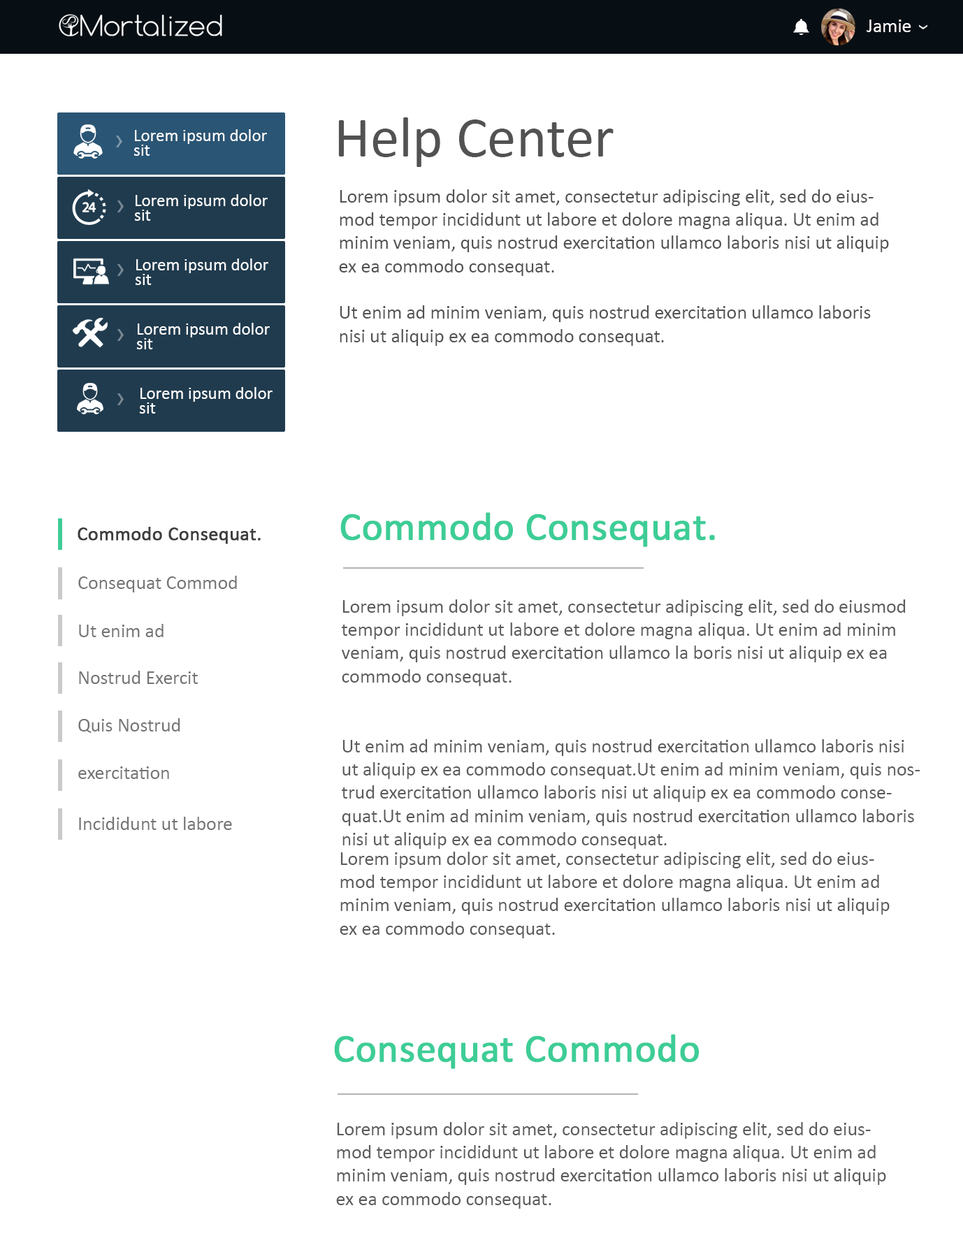
<style>
.page{position:relative;width:963px;height:1238px;background:#ffffff}
.page>*{position:absolute;margin:0}
.t1{font:19.4px "Calibri";color:#ffffff}
.t2{font:58.2px "Calibri";color:#535252}
.t3{font:17.5px/14.6px "Calibri";color:#ffffff}
.t4{font:19.4px "Calibri";color:#535252}
.t5{font:39.6px "Calibri";color:#3dcd96;font-weight:bold}
.t6{font:19.4px "Calibri";color:#3e3e3e;font-weight:bold}
.t7{font:19.4px "Calibri";color:#747474}
.t8{font:19.4px "Calibri";color:#5c5b5b}
</style>
<div class="page">
<p class="t1" style="left:867px;top:20px;width:44px;height:12px">Jamie</p>
<p class="t2" style="left:338px;top:117px;width:276px;height:50px">Help Center</p>
<p class="t3" style="left:133px;top:129px;width:134px;height:27px">Lorem ipsum dolor <br>sit</p>
<p class="t3" style="left:134px;top:194px;width:134px;height:27px">Lorem ipsum dolor <br>sit</p>
<p class="t4" style="left:339px;top:189px;width:550px;height:157px">Lorem ipsum dolor sit amet, consectetur adipiscing elit, sed do eiusmod tempor incididunt ut labore et dolore magna aliqua. Ut enim ad minim veniam, quis nostrud exercitation ullamco laboris nisi ut aliquip ex ea commodo consequat.<br><br>Ut enim ad minim veniam, quis nostrud exercitation ullamco laboris nisi ut aliquip ex ea commodo consequat.</p>
<p class="t3" style="left:135px;top:259px;width:133px;height:26px">Lorem ipsum dolor <br>sit</p>
<p class="t3" style="left:136px;top:323px;width:134px;height:26px">Lorem ipsum dolor <br>sit</p>
<p class="t3" style="left:139px;top:387px;width:134px;height:27px">Lorem ipsum dolor <br>sit</p>
<p class="t5" style="left:340px;top:512px;width:375px;height:35px">Commodo Consequat.</p>
<p class="t6" style="left:78px;top:527px;width:183px;height:17px">Commodo Consequat.</p>
<p class="t7" style="left:78px;top:576px;width:159px;height:17px">Consequat Commod</p>
<p class="t8" style="left:342px;top:600px;width:578px;height:249px">Lorem ipsum dolor sit amet, consectetur adipiscing elit, sed do eiusmod tempor incididunt ut labore et dolore magna aliqua. Ut enim ad minim veniam, quis nostrud exercitation ullamco la boris nisi ut aliquip ex ea commodo consequat.<br>           <br><br>Ut enim ad minim veniam, quis nostrud exercitation ullamco laboris nisi ut aliquip ex ea commodo consequat.Ut enim ad minim veniam, quis nostrud exercitation ullamco laboris nisi ut aliquip ex ea commodo consequat.Ut enim ad minim veniam, quis nostrud exercitation ullamco laboris nisi ut aliquip ex ea commodo consequat.</p>
<p class="t7" style="left:79px;top:624px;width:85px;height:13px">Ut enim ad</p>
<p class="t7" style="left:79px;top:671px;width:119px;height:13px">Nostrud Exercit</p>
<p class="t7" style="left:78px;top:718px;width:102px;height:15px">Quis Nostrud</p>
<p class="t7" style="left:78px;top:767px;width:91px;height:12px">exercitation</p>
<p class="t7" style="left:79px;top:817px;width:153px;height:13px">Incididunt ut labore</p>
<p class="t8" style="left:340px;top:852px;width:550px;height:87px">Lorem ipsum dolor sit amet, consectetur adipiscing elit, sed do eiusmod tempor incididunt ut labore et dolore magna aliqua. Ut enim ad minim veniam, quis nostrud exercitation ullamco laboris nisi ut aliquip ex ea commodo consequat.</p>
<p class="t5" style="left:334px;top:1034px;width:365px;height:35px">Consequat Commodo</p>
</div>
